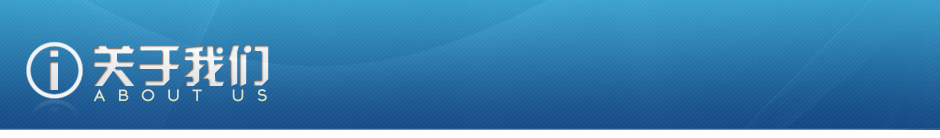
<style>
.page{position:relative;width:940px;height:138px}
.page>*{position:absolute;margin:0}
.t1{font:45px "JLinXin";color:#e8e8e8}
.t2{font:15px "TYPOGRAPHPRO-SemiBold";letter-spacing:0.76em;color:#dae0c9}
</style>
<div class="page">
<p class="t1" style="left:93px;top:44px;width:176px;height:43px">关于我们</p>
<p class="t2" style="left:93px;top:88px;width:174px;height:14px">ABOUT US</p>
</div>
